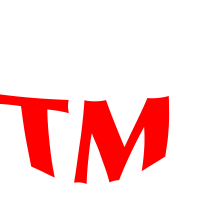
<style>
.page{position:relative;width:216px;height:216px;background:#ffffff}
.page>*{position:absolute;margin:0}
.t1{font:84px "Optima-ExtraBlack";color:#ff0000}
</style>
<div class="page">
<p class="t1" style="left:0px;top:94px;width:170px;height:90px">TM</p>
</div>
